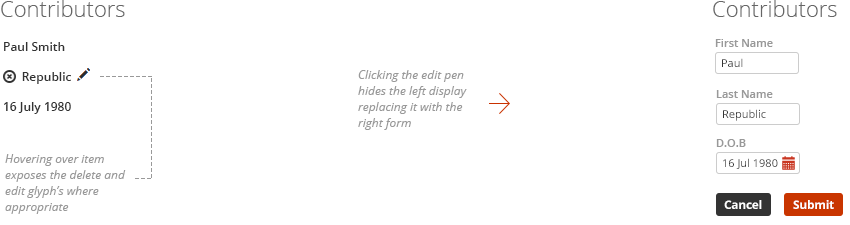
<style>
.page{position:relative;width:850px;height:225px;background:#ffffff}
.page>*{position:absolute;margin:0}
.t1{font:22px "OpenSans-Light";color:#666666}
.t2{font:11px "OpenSans-Semibold";color:#999999}
.t3{font:12px/10px "OpenSans-Semibold";color:#333333}
.t4{font:11px "OpenSans";color:#333333}
.t5{font:12px/16px "OpenSans-Italic";color:#999999}
.t6{font:12px "OpenSans-Bold";letter-spacing:-0.025em;color:#ffffff}
</style>
<div class="page">
<p class="t1" style="left:1px;top:0px;width:124px;height:17px">Contributors</p>
<p class="t1" style="left:713px;top:0px;width:124px;height:17px">Contributors</p>
<p class="t2" style="left:715px;top:39px;width:58px;height:8px">First Name</p>
<p class="t3" style="left:4px;top:42px;width:67px;height:72px">Paul Smith<br><br><br>      Republic<br><br><br>16 July 1980</p>
<p class="t4" style="left:722px;top:58px;width:21px;height:9px">Paul</p>
<p class="t5" style="left:358px;top:70px;width:109px;height:60px">Clicking the edit pen <br>hides the left display<br>replacing it with the <br>right form</p>
<p class="t2" style="left:716px;top:90px;width:57px;height:8px">Last Name</p>
<p class="t4" style="left:723px;top:109px;width:43px;height:12px">Republic</p>
<p class="t2" style="left:716px;top:139px;width:30px;height:8px">D.O.B</p>
<p class="t5" style="left:5px;top:154px;width:121px;height:60px">Hovering over item<br>exposes the delete and <br>edit glyph’s where<br>appropriate</p>
<p class="t4" style="left:723px;top:158px;width:55px;height:11px">16 Jul 1980</p>
<p class="t6" style="left:724px;top:200px;width:38px;height:9px">Cancel</p>
<p class="t6" style="left:793px;top:200px;width:41px;height:9px">Submit</p>
</div>
